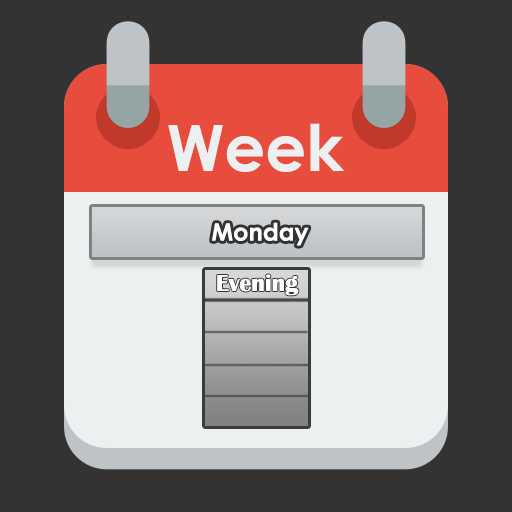
<style>
.page{position:relative;width:512px;height:512px;background:#333333}
.page>*{position:absolute;margin:0}
.t1{font:64px "CenturyGothic-Bold";color:#ecf0f1}
.t2{font:24px "CenturyGothic-Bold";color:#ecf0f1}
.t3{font:14.7px "CenturyGothic-Bold";color:#ecf0f1}
.t4{font:24px "BritannicBold";color:#ffffff}
</style>
<div class="page">
<p class="t1" style="left:168px;top:123px;width:177px;height:49px">Week</p>
<p class="t2" style="left:212px;top:222px;width:97px;height:24px"><span class="t3"><br></span>Monday</p>
<p class="t4" style="left:217px;top:274px;width:82px;height:22px">Evening</p>
</div>
